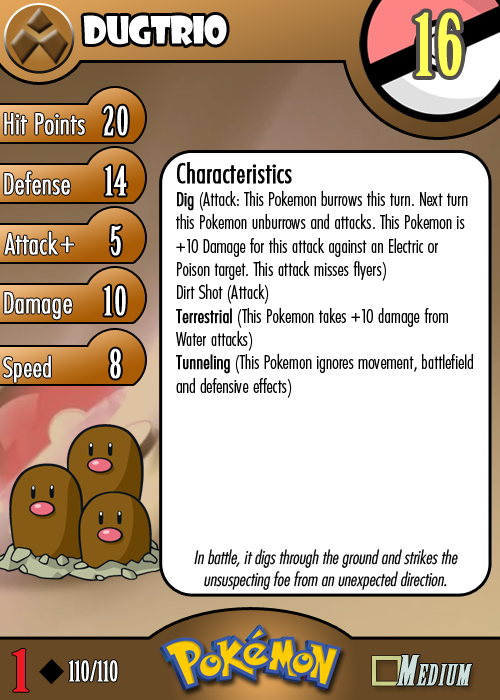
<style>
.page{position:relative;width:500px;height:700px;background:#ffffff}
.page>*{position:absolute;margin:0}
.t1{font:36.7px "ShowcardGothic-Reg";letter-spacing:-0.025em;color:#ffffff;scale:0.91 1}
.t2{font:83.3px "BirchStd";letter-spacing:0.025em;color:#fffd59;font-weight:bold}
.t3{font:27.8px "Futura-CondensedLight";color:#ffffff;font-weight:bold}
.t4{font:38.9px "BirchStd";letter-spacing:0.035em;color:#ffffff;font-weight:bold}
.t5{font:19.4px "FuturaCondensedBQ-Light";color:#010101}
.t6{font:27.8px "FuturaCondensedBQ-Light";color:#010101;font-weight:bold}
.t7{font:19.4px "FuturaCondensedBQ-Light";color:#010101;font-weight:bold}
.t8{font:30.6px "Futura-CondensedLight";color:#ffffff;font-weight:bold}
.t9{font:27.8px "FuturaCondensedBQ-Light";color:#ffffff;font-weight:bold}
.t10{font:18.1px "Futura-CondensedLight";color:#010101;font-style:italic}
.t11{font:55.6px "BirchStd";color:#ed1c24;font-weight:bold;scale:1.5 1}
.t12{font:27.8px "BirchStd";color:#ffffff;font-weight:bold}
</style>
<div class="page">
<p class="t1" style="left:83px;top:15px;width:144px;height:31px">dugtrio</p>
<p class="t2" style="left:415px;top:12px;width:47px;height:64px">16</p>
<p class="t3" style="left:4px;top:113px;width:81px;height:22px">Hit Points</p>
<p class="t4" style="left:103px;top:105px;width:25px;height:31px">20</p>
<p class="t3" style="left:4px;top:171px;width:66px;height:24px">Defense</p>
<p class="t4" style="left:105px;top:165px;width:22px;height:31px">14</p>
<p class="t5" style="left:176px;top:162px;width:297px;height:236px"><span class="t6">Characteristics<br></span><span class="t7">Dig</span> (Attack: This Pokemon burrows this turn. Next turn this Pokemon unburrows and attacks. This Pokemon is +10 Damage for this attack against an Electric or Poison target. This attack misses flyers)<br>Dirt Shot (Attack)<br><span class="t7">Terrestrial</span> (This Pokemon takes +10 damage from Water attacks)<br><span class="t7">Tunneling</span> (This Pokemon ignores movement, battlefield and defensive effects)</p>
<p class="t3" style="left:4px;top:231px;width:54px;height:24px">Attack</p>
<p class="t4" style="left:111px;top:225px;width:10px;height:31px">5</p>
<p class="t8" style="left:60px;top:236px;width:14px;height:17px">+</p>
<p class="t3" style="left:4px;top:292px;width:68px;height:28px">Damage</p>
<p class="t4" style="left:104px;top:285px;width:22px;height:31px">10</p>
<p class="t4" style="left:110px;top:348px;width:11px;height:31px">8</p>
<p class="t9" style="left:3px;top:355px;width:48px;height:28px">Speed</p>
<p class="t10" style="left:194px;top:549px;width:264px;height:41px;text-align:center">In battle, it digs through the ground and strikes the unsuspecting foe from an unexpected direction.</p>
<p class="t11" style="left:12px;top:649px;width:17px;height:43px">1</p>
<p class="t12" style="left:68px;top:660px;width:50px;height:22px">110/110</p>
</div>
